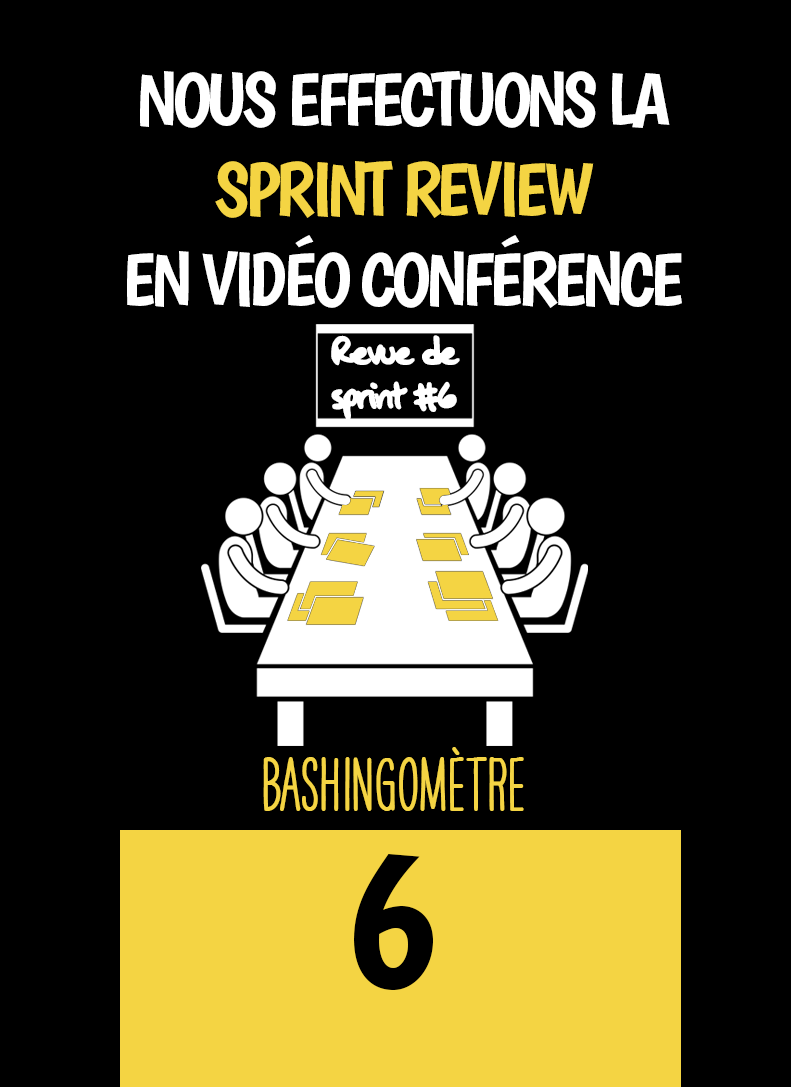
<style>
.page{position:relative;width:791px;height:1087px;background:#000000}
.page>*{position:absolute;margin:0}
.t1{font:75px "Boogaloo-Regular";letter-spacing:-0.06em;color:#ffffff}
.t2{font:75px "Boogaloo-Regular";letter-spacing:-0.06em;color:#f4d443}
.t3{font:45.8px/44.2px "OakStreetW01-Regular";letter-spacing:-0.08em;color:#ffffff}
.t4{font:66.7px "HAVEANICEDAYTallW04-Bold";color:#f4d443}
.t5{font:200px "Boogaloo-Regular";color:#000000}
</style>
<div class="page">
<p class="t1" style="left:127px;top:71px;width:555px;height:237px;text-align:center">NOUS EFFECTUONS LA <span class="t2">SPRINT REVIEW <br></span>EN VIDÉO CONFÉRENCE</p>
<p class="t3" style="left:331px;top:335px;width:129px;height:86px;text-align:center">Revue de sprint #6</p>
<p class="t4" style="left:263px;top:747px;width:261px;height:64px">BASHINgomètre</p>
<p class="t5" style="left:354px;top:854px;width:79px;height:136px">6</p>
</div>
